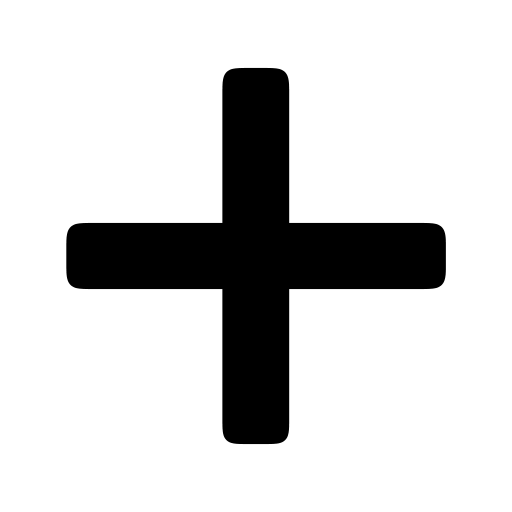
<style>
.page{position:relative;width:512px;height:512px;background:#ffffff}
.page>*{position:absolute;margin:0}
.t1{font:666.7px "NanumGothic";color:#000000;font-weight:bold}
</style>
<div class="page">
<p class="t1" style="left:66px;top:67px;width:380px;height:378px">+</p>
</div>
